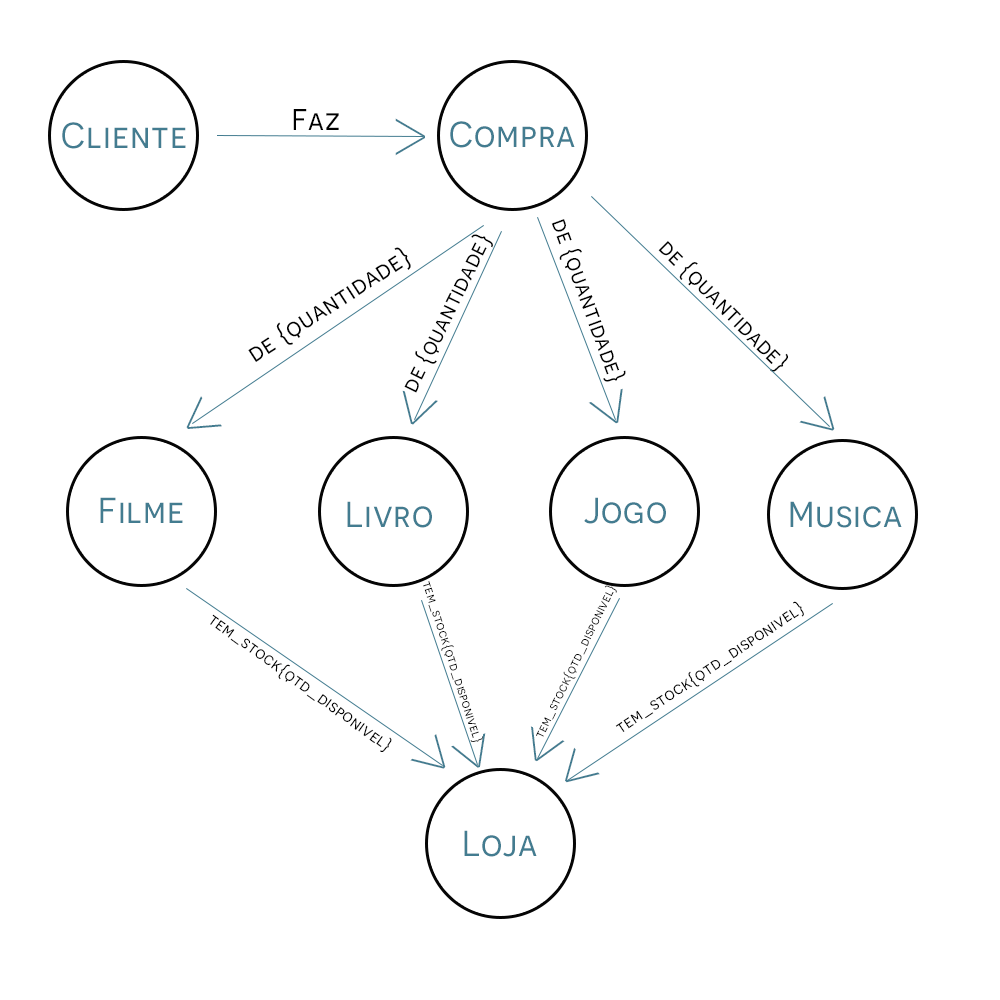
<style>
.page{position:relative;width:1000px;height:1000px;background:#ffffff}
.page>*{position:absolute;margin:0}
.t1{font:30px "Novecentosans-Normal";letter-spacing:0.025em;color:#000000}
.t2{font:36px "Novecentosans-Normal";letter-spacing:0.025em;color:#437c90}
.t3{font:74px "Novecentosans-UltraLight";letter-spacing:0.025em;color:#437c90}
.t4{font:23.3px "Novecentosans-Normal";letter-spacing:0.025em;color:#000000}
.t5{font:25.3px "Novecentosans-Normal";letter-spacing:0.025em;color:#000000}
.t6{font:12.9px "Novecentosans-Normal";letter-spacing:0.025em;color:#000000}
.t7{font:17px "Novecentosans-Normal";letter-spacing:0.025em;color:#000000}
</style>
<div class="page">
<p class="t1" style="left:293px;top:109px;width:46px;height:21px">Faz</p>
<p class="t2" style="left:62px;top:122px;width:124px;height:27px">Cliente</p>
<p class="t3" style="left:395px;top:118px;width:30px;height:38px;rotate:180deg">&lt;</p>
<p class="t2" style="left:450px;top:121px;width:125px;height:27px">Compra</p>
<p class="t4" style="left:551px;top:219px;width:75px;height:163px;rotate:70deg">de {quantidade}</p>
<p class="t4" style="left:404px;top:234px;width:89px;height:159px;rotate:-64deg">de {quantidade}</p>
<p class="t4" style="left:658px;top:241px;width:130px;height:131px;rotate:45deg">de {quantidade}</p>
<p class="t5" style="left:248px;top:247px;width:163px;height:115px;rotate:-33deg">de {quantidade}</p>
<p class="t3" style="left:402px;top:390px;width:36px;height:35px;rotate:-74deg">&lt;</p>
<p class="t3" style="left:588px;top:388px;width:35px;height:36px;rotate:-113deg">&lt;</p>
<p class="t3" style="left:186px;top:396px;width:36px;height:33px;rotate:-35deg">&lt;</p>
<p class="t3" style="left:799px;top:396px;width:36px;height:35px;rotate:-136deg">&lt;</p>
<p class="t2" style="left:100px;top:497px;width:83px;height:26px">Filme</p>
<p class="t2" style="left:584px;top:497px;width:82px;height:27px">Jogo</p>
<p class="t2" style="left:347px;top:501px;width:85px;height:27px">Livro</p>
<p class="t2" style="left:790px;top:501px;width:112px;height:27px">Musica</p>
<p class="t6" style="left:423px;top:581px;width:60px;height:161px;rotate:72deg">tem_stock{qtd_disponivel}</p>
<p class="t6" style="left:536px;top:585px;width:81px;height:152px;rotate:-64deg">tem_stock{qtd_disponivel}</p>
<p class="t7" style="left:615px;top:601px;width:189px;height:131px;rotate:-34deg">tem_stock{qtd_disponivel}</p>
<p class="t7" style="left:210px;top:614px;width:182px;height:138px;rotate:36deg">tem_stock{qtd_disponivel}</p>
<p class="t3" style="left:530px;top:726px;width:35px;height:36px;rotate:-66deg">&lt;</p>
<p class="t3" style="left:410px;top:734px;width:36px;height:35px;rotate:-136deg">&lt;</p>
<p class="t3" style="left:451px;top:733px;width:35px;height:35px;rotate:-111deg">&lt;</p>
<p class="t3" style="left:565px;top:747px;width:35px;height:36px;rotate:-44deg">&lt;</p>
<p class="t2" style="left:464px;top:830px;width:73px;height:27px">Loja</p>
</div>
